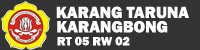
<style>
.page{position:relative;width:200px;height:50px;background:#333333}
.page>*{position:absolute;margin:0}
.t1{font:16.7px "FranklinGothic-Heavy";color:#fefefe}
.t2{font:12.5px "FranklinGothic-Heavy";color:#ffffff}
</style>
<div class="page">
<p class="t1" style="left:56px;top:6px;width:133px;height:13px">KARANG TARUNA</p>
<p class="t1" style="left:57px;top:21px;width:111px;height:12px">KARANGBONG</p>
<p class="t2" style="left:57px;top:36px;width:73px;height:10px">RT 05 RW 02</p>
</div>
